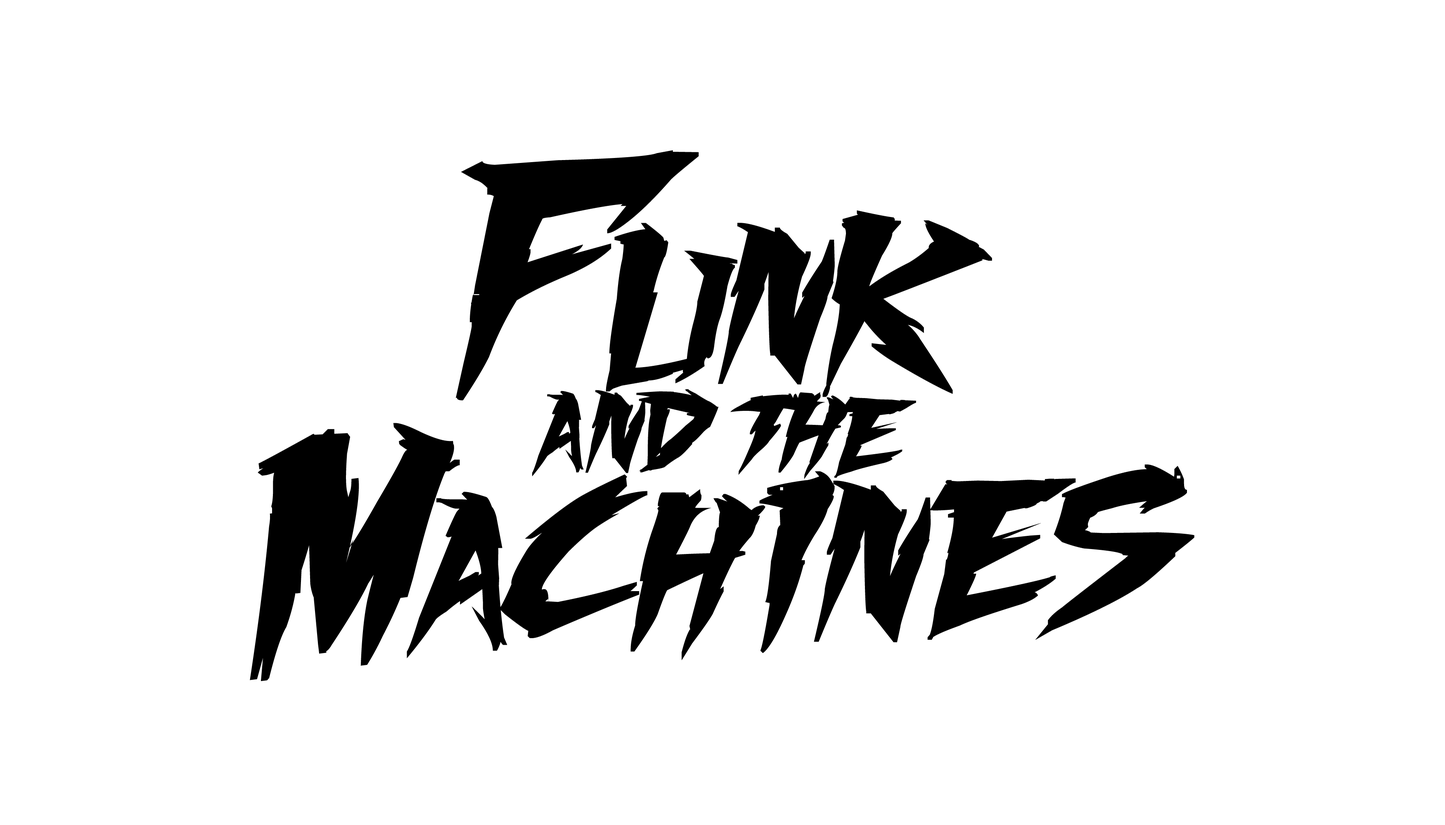
<style>
.page{position:relative;width:1445px;height:825px;background:#ffffff}
.page>*{position:absolute;margin:0}
.t1{font:261.8px "FightingSpiritturbo-BoldItalic";letter-spacing:0.16em;color:#000000;text-transform:uppercase}
.t2{font:175.5px "FightingSpiritturbo-BoldItalic";letter-spacing:0.16em;color:#000000;text-transform:uppercase}
.t3{font:90px "FightingSpiritturbo-BoldItalic";letter-spacing:0.16em;color:#000000;text-transform:uppercase}
</style>
<div class="page">
<p class="t1" style="left:456px;top:150px;width:243px;height:251px">F</p>
<p class="t2" style="left:822px;top:210px;width:170px;height:187px">k</p>
<p class="t2" style="left:605px;top:223px;width:132px;height:169px">u</p>
<p class="t2" style="left:718px;top:223px;width:117px;height:162px">n</p>
<p class="t3" style="left:636px;top:389px;width:83px;height:84px">d</p>
<p class="t3" style="left:532px;top:391px;width:52px;height:86px">a</p>
<p class="t3" style="left:585px;top:390px;width:60px;height:83px">n</p>
<p class="t3" style="left:730px;top:393px;width:74px;height:82px;rotate:4deg">t</p>
<p class="t3" style="left:778px;top:392px;width:75px;height:87px;rotate:4deg">h</p>
<p class="t3" style="left:834px;top:397px;width:82px;height:81px;rotate:4deg">e</p>
<p class="t1" style="left:250px;top:423px;width:210px;height:259px">M</p>
<p class="t2" style="left:759px;top:471px;width:76px;height:183px">i</p>
<p class="t2" style="left:1035px;top:465px;width:159px;height:176px">s</p>
<p class="t2" style="left:499px;top:475px;width:148px;height:163px">c</p>
<p class="t2" style="left:813px;top:481px;width:118px;height:162px">n</p>
<p class="t2" style="left:927px;top:478px;width:149px;height:162px">e</p>
<p class="t2" style="left:407px;top:492px;width:100px;height:167px">a</p>
<p class="t2" style="left:630px;top:489px;width:135px;height:172px">h</p>
</div>
